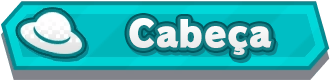
<style>
.page{position:relative;width:330px;height:80px}
.page>*{position:absolute;margin:0}
.t1{font:36px "RodinPro-UB";letter-spacing:0.014em;color:#f2f3f3}
</style>
<div class="page">
<p class="t1" style="left:129px;top:18px;width:143px;height:37px">Cabeça</p>
</div>
